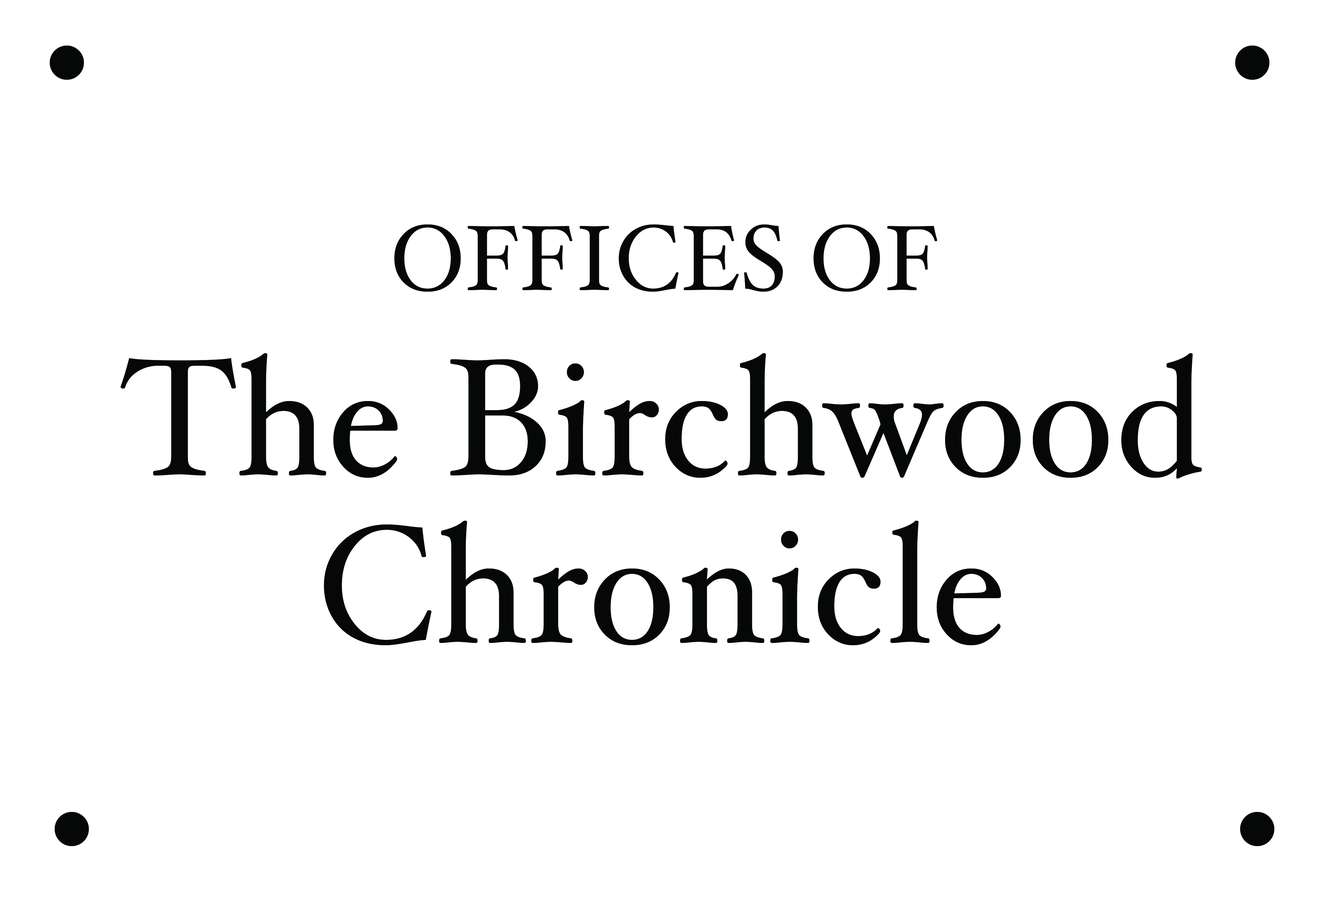
<style>
.page{position:relative;width:1329px;height:897px;background:#ffffff}
.page>*{position:absolute;margin:0}
.t1{font:92.6px "HoeflerText";letter-spacing:0.005em;color:#060808}
.t2{font:166.7px/167.7px "HoeflerText";letter-spacing:0.005em;color:#060808}
</style>
<div class="page">
<p class="t1" style="left:394px;top:224px;width:544px;height:68px">OFFICES OF</p>
<p class="t2" style="left:120px;top:353px;width:1082px;height:292px;text-align:center">The Birchwood Chronicle</p>
</div>
